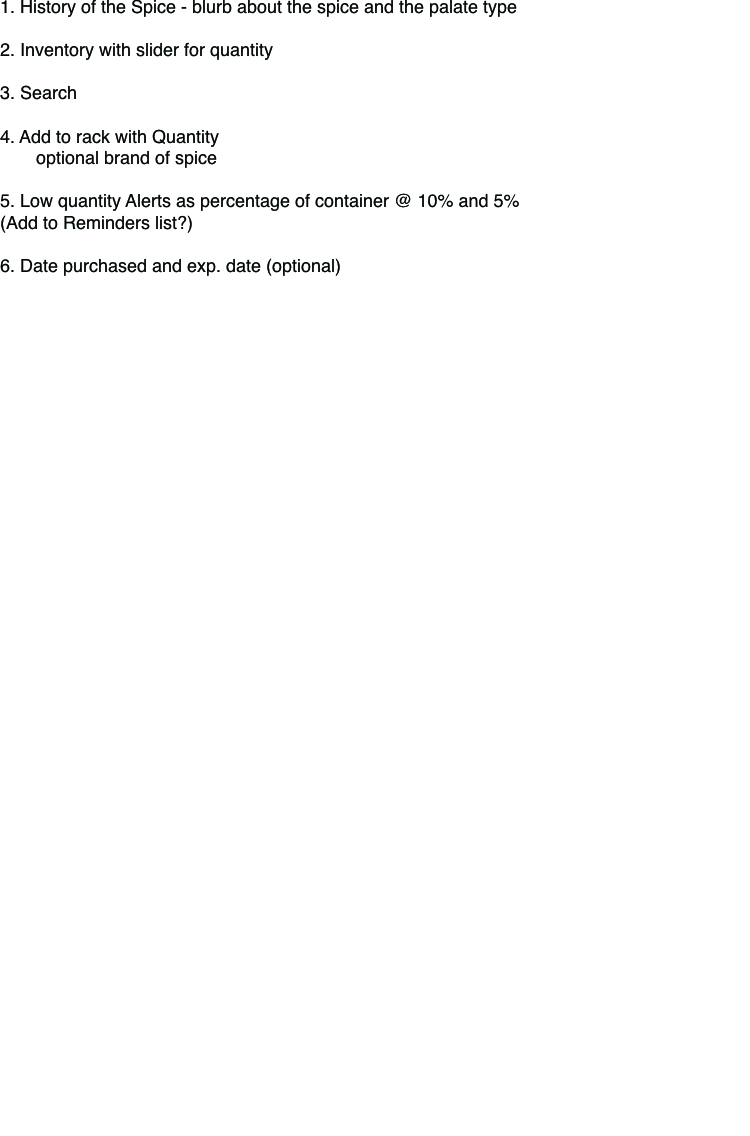
<style>
.page{position:relative;width:750px;height:1136px;background:#ffffff}
.page>*{position:absolute;margin:0}
.t1{font:18px "Helvetica";color:#060808}
</style>
<div class="page">
<p class="t1" style="left:0px;top:0px;width:519px;height:276px">1. History of the Spice - blurb about the spice and the palate type<br><br>2. Inventory with slider for quantity<br><br>3. Search<br><br>4. Add to rack with Quantity<br> optional brand of spice<br><br>5. Low quantity Alerts as percentage of container @ 10% and 5%<br>(Add to Reminders list?)<br><br>6. Date purchased and exp. date (optional)</p>
</div>
